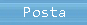
<style>
.page{position:relative;width:87px;height:25px}
.page>*{position:absolute;margin:0}
.t1{font:16px "Consolas";color:#ffffff}
</style>
<div class="page">
<p class="t1" style="left:24px;top:7px;width:41px;height:10px">Posta</p>
</div>
